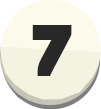
<style>
.page{position:relative;width:101px;height:109px;background:#f4f3e1}
.page>*{position:absolute;margin:0}
.t1{font:72px "MovaviGrotesqueBlack";color:#282828}
</style>
<div class="page">
<p class="t1" style="left:32px;top:25px;width:40px;height:51px">7</p>
</div>
